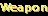
<style>
.page{position:relative;width:48px;height:16px;background:#000000}
.page>*{position:absolute;margin:0}
.t1{font:11px "Meiryo";color:#f0f080;font-weight:bold}
</style>
<div class="page">
<p class="t1" style="left:0px;top:3px;width:47px;height:10px">Weapon</p>
</div>
